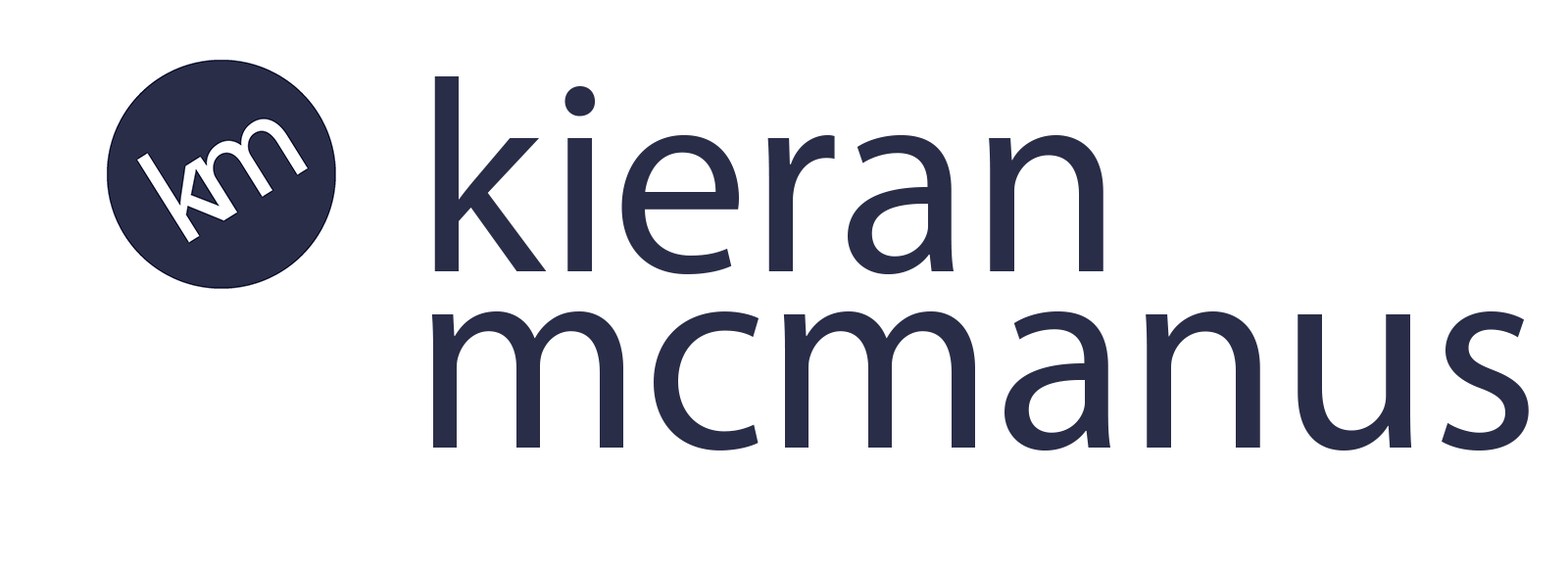
<style>
.page{position:relative;width:1568px;height:569px;background:#ffffff}
.page>*{position:absolute;margin:0}
.t1{font:274.4px "MyriadPro-Regular";color:#292d48}
</style>
<div class="page">
<p class="t1" style="left:434px;top:76px;width:669px;height:198px">kieran</p>
<p class="t1" style="left:431px;top:311px;width:1098px;height:140px">mcmanus</p>
</div>
